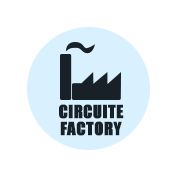
<style>
.page{position:relative;width:177px;height:177px;background:#ffffff}
.page>*{position:absolute;margin:0}
.t1{font:16.7px/16.7px "Impact";letter-spacing:0.01em;color:#172127;text-transform:uppercase;font-weight:bold}
</style>
<div class="page">
<p class="t1" style="left:59px;top:104px;width:65px;height:32px;text-align:center">Circuite<br>Factory</p>
</div>
